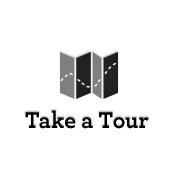
<style>
.page{position:relative;width:175px;height:175px;background:#ffffff}
.page>*{position:absolute;margin:0}
.t1{font:24px "Archer-Bold";color:#000000}
</style>
<div class="page">
<p class="t1" style="left:25px;top:110px;width:124px;height:19px">Take a Tour</p>
</div>
